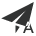
<style>
.page{position:relative;width:36px;height:36px;background:#ffffff}
.page>*{position:absolute;margin:0}
.t1{font:16px "PingFangSC-Medium";color:#323333;text-transform:uppercase}
</style>
<div class="page">
<p class="t1" style="left:23px;top:21px;width:11px;height:12px">A</p>
<p class="t1" style="left:23px;top:21px;width:11px;height:12px">A</p>
</div>
